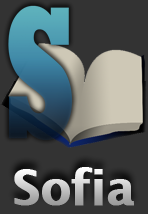
<style>
.page{position:relative;width:148px;height:214px;background:#333333}
.page>*{position:absolute;margin:0}
.t1{font:48px "LucidaGrande-Bold";letter-spacing:-0.025em;font-weight:bold}
</style>
<div class="page">
<p class="t1" style="left:14px;top:167px;width:120px;height:39px">Sofia</p>
</div>
